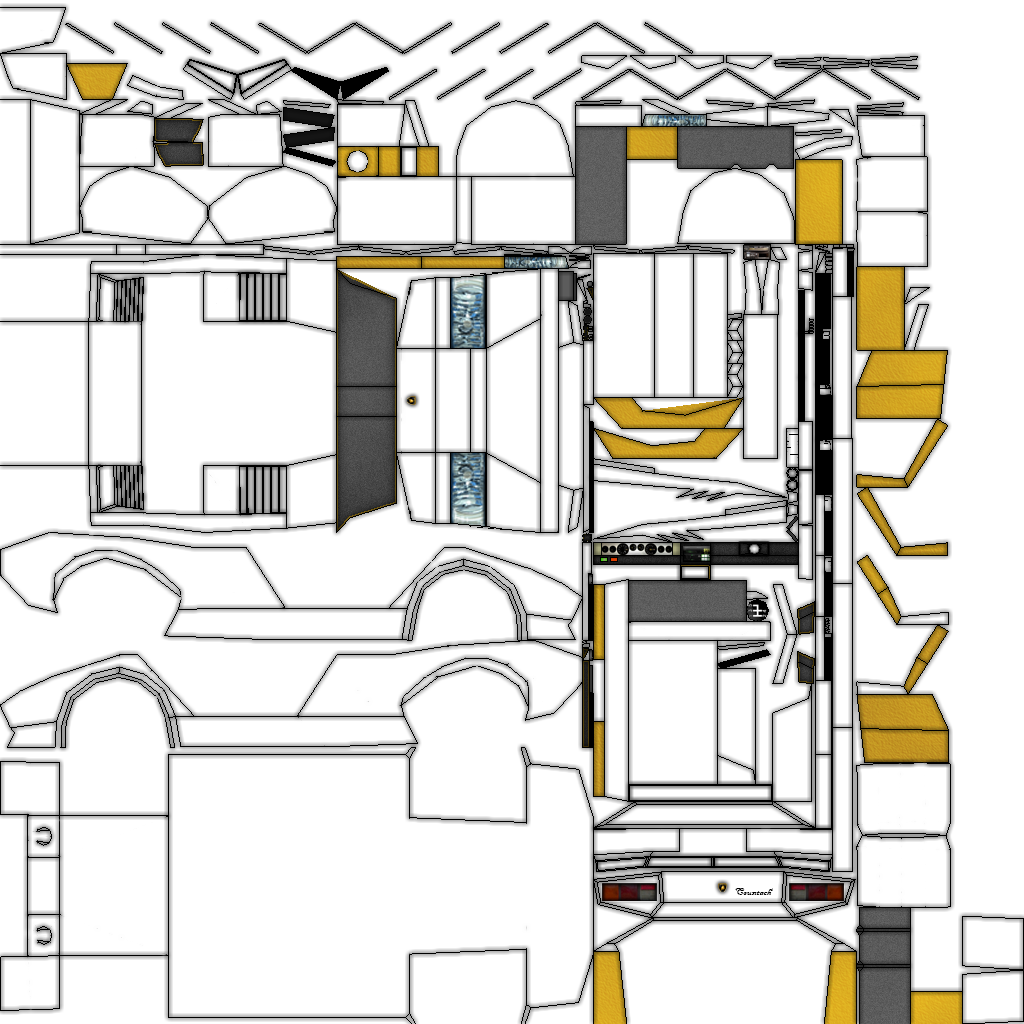
<style>
.page{position:relative;width:1024px;height:1024px;background:#ffffff}
.page>*{position:absolute;margin:0}
.t1{font:11px "BlackadderITC-Regular";color:#000000}
</style>
<div class="page">
<p class="t1" style="left:735px;top:888px;width:38px;height:7px">Countach</p>
</div>
